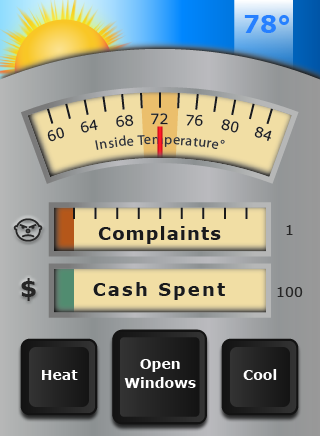
<style>
.page{position:relative;width:320px;height:436px}
.page>*{position:absolute;margin:0}
.t1{font:24px "Verdana-Bold";color:#2680ff}
.t2{font:14px/18.8px "Verdana";color:#191919}
.t3{font:14px "MyriadPro-Regular";letter-spacing:0.04em;color:#333333}
.t4{font:18px "Verdana-Bold";letter-spacing:0.06em;color:#1a1a1a}
.t5{font:14px "Verdana";color:#262626}
.t6{font:24px "Verdana-Bold";letter-spacing:0.06em;color:#262626}
.t7{font:18px "Verdana-Bold";letter-spacing:0.12em;color:#1a1a1a}
</style>
<div class="page">
<p class="t1" style="left:244px;top:15px;width:45px;height:18px">78°</p>
<p class="t2" style="left:47px;top:113px;width:225px;height:29px">60   64   68   72   76   80   84</p>
<p class="t3" style="left:95px;top:135px;width:130px;height:15px">Inside Temperature°</p>
<p class="t4" style="left:98px;top:226px;width:123px;height:18px">Complaints</p>
<p class="t5" style="left:286px;top:225px;width:7px;height:10px">1</p>
<p class="t6" style="left:21px;top:278px;width:15px;height:23px">$</p>
<p class="t7" style="left:93px;top:282px;width:132px;height:18px">Cash Spent</p>
<p class="t5" style="left:277px;top:287px;width:26px;height:10px">100</p>
</div>
